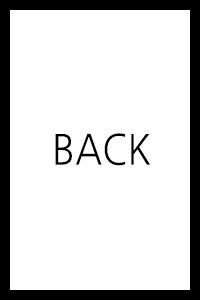
<style>
.page{position:relative;width:200px;height:300px;background:#ffffff}
.page>*{position:absolute;margin:0}
.t1{font:41.7px "NanumGothic";color:#000000;scale:0.9 1}
</style>
<div class="page">
<p class="t1" style="left:55px;top:133px;width:95px;height:33px">BACK</p>
</div>
